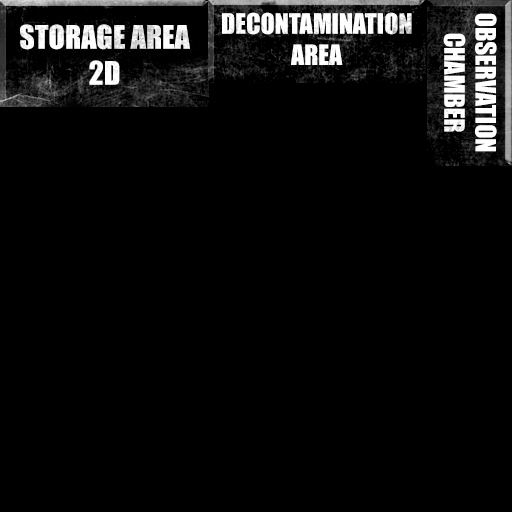
<style>
.page{position:relative;width:512px;height:512px;background:#000000}
.page>*{position:absolute;margin:0}
.t1{font:26px "Impact";color:#ffffff}
</style>
<div class="page">
<p class="t1" style="left:222px;top:12px;width:190px;height:53px;text-align:center">DECONTAMINATION<br>AREA</p>
<p class="t1" style="left:443px;top:13px;width:54px;height:139px;text-align:center;rotate:90deg">OBSERVATION<br>CHAMBER</p>
</div>
